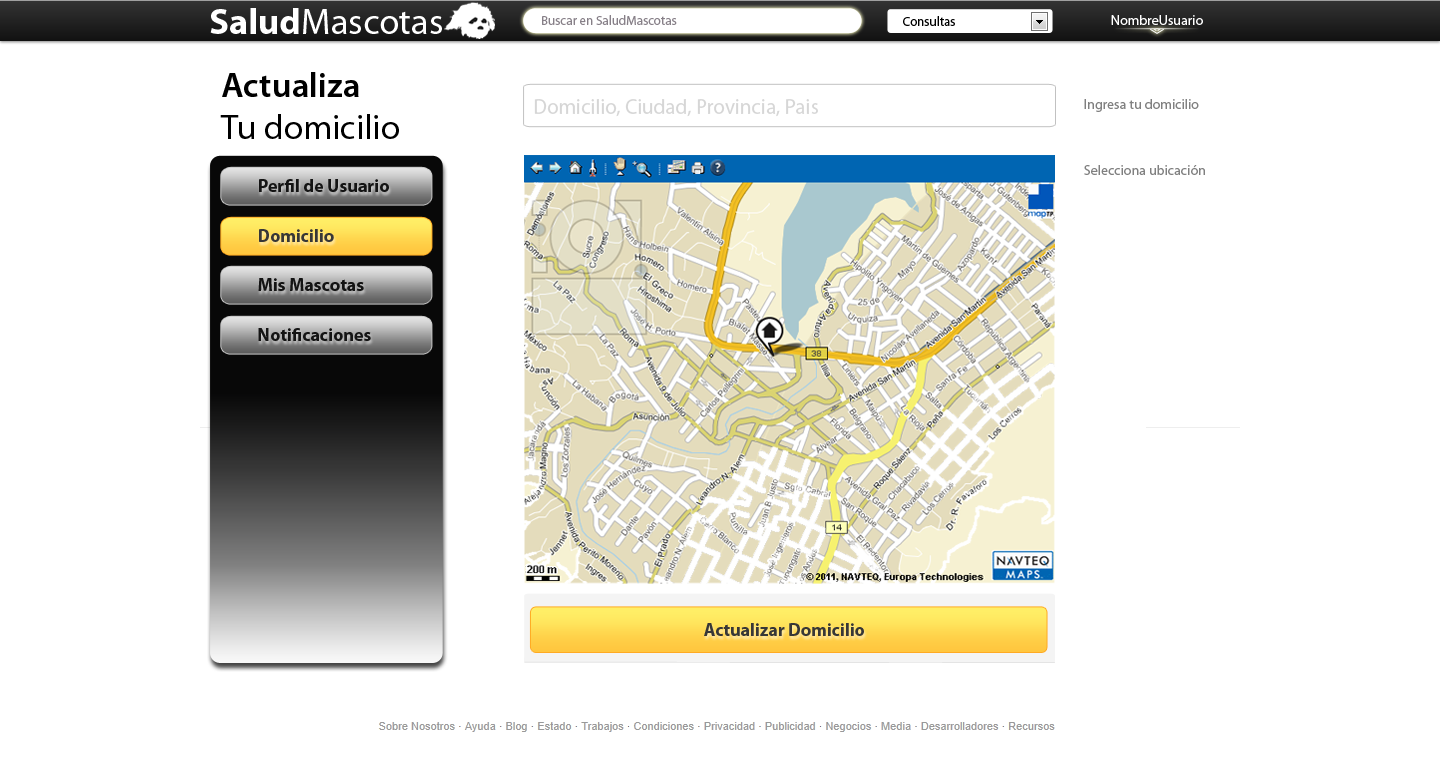
<style>
.page{position:relative;width:1440px;height:770px;background:#ffffff}
.page>*{position:absolute;margin:0}
.t1{font:36.6px "MyriadPro-Regular";color:#ffffff}
.t2{font:36.6px "MyriadPro-Bold";color:#ffffff}
.t3{font:13px "MyriadPro-Regular";color:#878088}
.t4{font:13px "MyriadPro-Regular";color:#000000}
.t5{font:14px "MyriadPro-Semibold"}
.t6{font:14px "MyriadPro-Regular";color:#ffffff}
.t7{font:35px "MyriadPro-Regular";color:#000000}
.t8{font:35px "MyriadPro-Semibold";color:#000000}
.t9{font:21px "MyriadPro-Regular";color:#d6d6d6}
.t10{font:14px "MyriadPro-Regular";color:#808080}
.t11{font:18px "MyriadPro-Bold";color:#141414}
.t12{font:18px "MyriadPro-Bold";color:#373737}
</style>
<div class="page">
<p class="t1" style="left:210px;top:8px;width:232px;height:26px"><span class="t2">Salud</span>Mascotas</p>
<p class="t3" style="left:542px;top:15px;width:135px;height:10px">Buscar en SaludMascotas</p>
<p class="t4" style="left:903px;top:16px;width:52px;height:10px">Consultas</p>
<p class="t5" style="left:1110px;top:15px;width:95px;height:10px">NombreUsuario</p>
<p class="t6" style="left:1111px;top:15px;width:92px;height:10px">NombreUsuario</p>
<p class="t7" style="left:220px;top:72px;width:179px;height:67px"><span class="t8">Actualiza<br></span>Tu domicilio</p>
<p class="t9" style="left:534px;top:99px;width:284px;height:18px">Domicilio, Ciudad, Provincia, Pais</p>
<p class="t10" style="left:1084px;top:99px;width:115px;height:13px">Ingresa tu domicilio</p>
<p class="t10" style="left:1084px;top:165px;width:121px;height:10px">Selecciona ubicación</p>
<p class="t11" style="left:259px;top:179px;width:130px;height:13px">Perfil de Usuario</p>
<p class="t12" style="left:259px;top:229px;width:75px;height:13px">Domicilio</p>
<p class="t11" style="left:258px;top:278px;width:106px;height:13px">Mis Mascotas</p>
<p class="t11" style="left:258px;top:328px;width:113px;height:13px">Notificaciones</p>
<p class="t12" style="left:704px;top:623px;width:160px;height:13px">Actualizar Domicilio</p>
</div>
